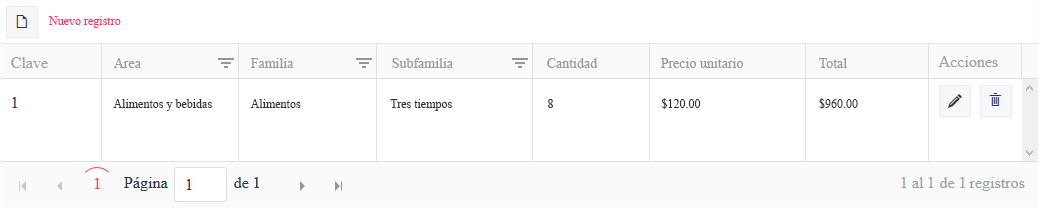
<style>
.page{position:relative;width:1039px;height:208px;background:#ffffff}
.page>*{position:absolute;margin:0}
.t1{font:12px "TimesNewRomanPSMT";color:#ff3366}
.t2{font:14px "TimesNewRomanPSMT";color:#999999}
.t3{font:12px "TimesNewRomanPSMT";color:#333333}
</style>
<div class="page">
<p class="t1" style="left:48px;top:16px;width:73px;height:12px">Nuevo registro</p>
<p class="t2" style="left:113px;top:58px;width:28px;height:10px">Area</p>
<p class="t2" style="left:250px;top:58px;width:44px;height:10px">Familia</p>
<p class="t2" style="left:392px;top:58px;width:61px;height:10px">Subfamilia</p>
<p class="t2" style="left:547px;top:58px;width:51px;height:10px">Cantidad</p>
<p class="t2" style="left:660px;top:58px;width:84px;height:10px">Precio unitario</p>
<p class="t2" style="left:819px;top:58px;width:28px;height:10px">Total</p>
<p class="t3" style="left:113px;top:99px;width:99px;height:12px">Alimentos y bebidas</p>
<p class="t3" style="left:250px;top:99px;width:51px;height:9px">Alimentos</p>
<p class="t3" style="left:390px;top:99px;width:62px;height:12px">Tres tiempos</p>
<p class="t3" style="left:548px;top:99px;width:5px;height:9px">8</p>
<p class="t3" style="left:662px;top:98px;width:39px;height:11px">$120.00</p>
<p class="t3" style="left:819px;top:98px;width:39px;height:11px">$960.00</p>
</div>
